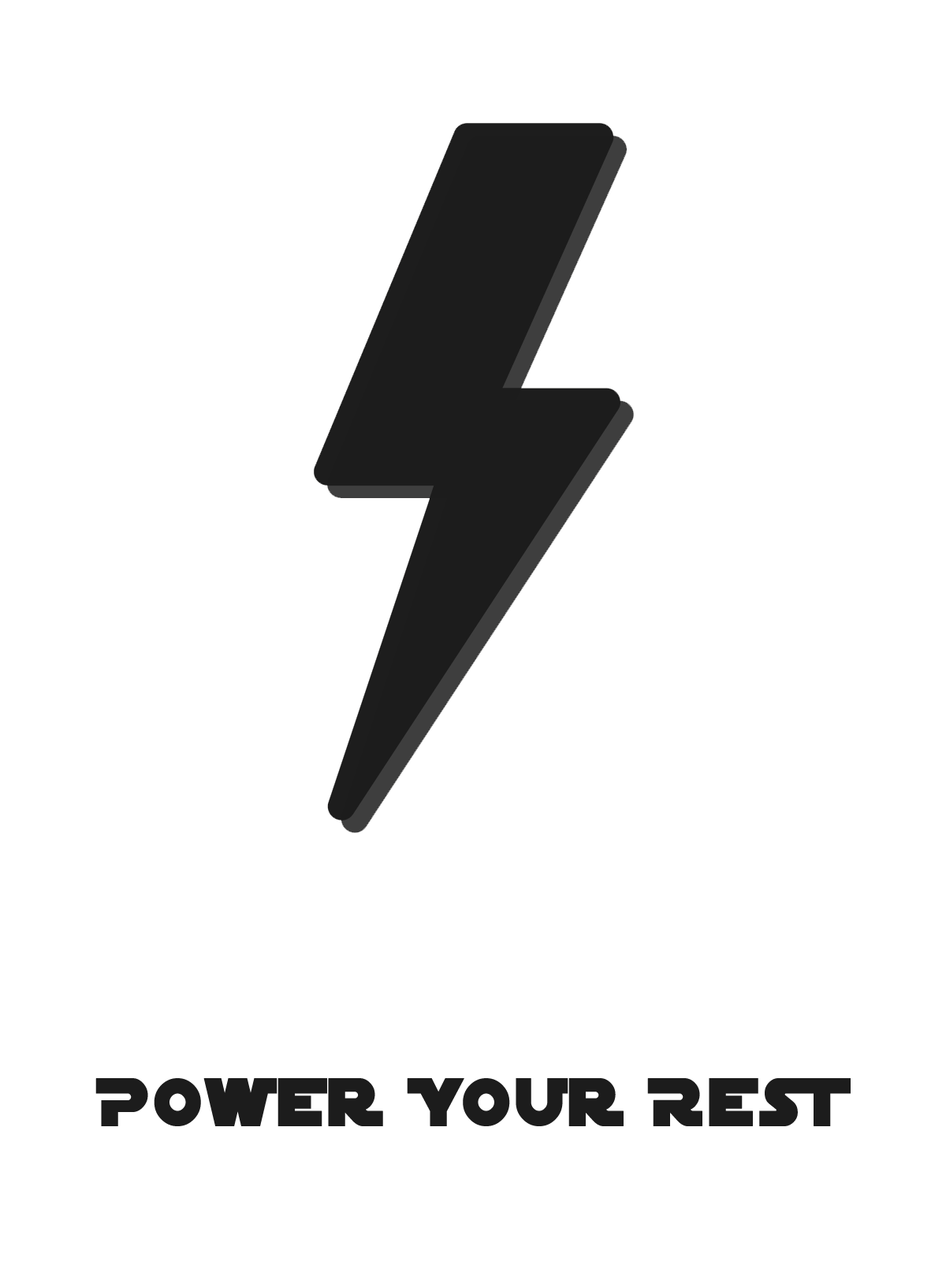
<style>
.page{position:relative;width:946px;height:1261px;background:#ffffff}
.page>*{position:absolute;margin:0}
.t1{font:71px "SFDistantGalaxyAlternate";letter-spacing:0.04em;color:#1c1c1c;font-weight:bold;scale:0.91 1}
</style>
<div class="page">
<p class="t1" style="left:95px;top:1078px;width:755px;height:48px">Power Your Rest</p>
</div>
